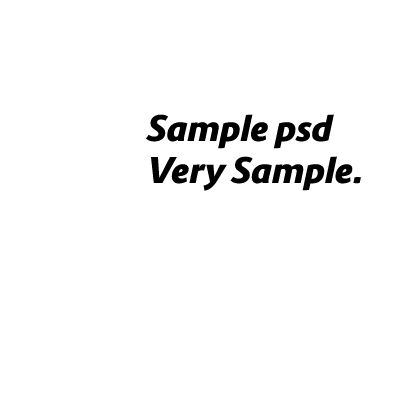
<style>
.page{position:relative;width:400px;height:400px;background:#ffffff}
.page>*{position:absolute;margin:0}
.t1{font:35px "Route159-HeavyItalic";color:#000000}
</style>
<div class="page">
<p class="t1" style="left:145px;top:114px;width:216px;height:77px">Sample psd<br>Very Sample.</p>
</div>
